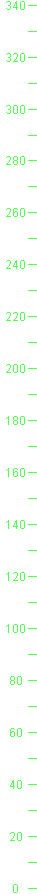
<style>
.page{position:relative;width:37px;height:894px;background:#ffffff}
.page>*{position:absolute;margin:0}
.t1{font:12px "ArialMT";color:#55ff55}
</style>
<div class="page">
<p class="t1" style="left:6px;top:1px;width:19px;height:9px">340</p>
<p class="t1" style="left:6px;top:53px;width:19px;height:9px">320</p>
<p class="t1" style="left:6px;top:105px;width:19px;height:9px">300</p>
<p class="t1" style="left:6px;top:156px;width:19px;height:9px">280</p>
<p class="t1" style="left:6px;top:208px;width:19px;height:9px">260</p>
<p class="t1" style="left:6px;top:260px;width:19px;height:9px">240</p>
<p class="t1" style="left:6px;top:312px;width:19px;height:9px">220</p>
<p class="t1" style="left:6px;top:364px;width:19px;height:9px">200</p>
<p class="t1" style="left:6px;top:416px;width:19px;height:9px">180</p>
<p class="t1" style="left:6px;top:468px;width:19px;height:9px">160</p>
<p class="t1" style="left:6px;top:520px;width:19px;height:9px">140</p>
<p class="t1" style="left:6px;top:572px;width:19px;height:9px">120</p>
<p class="t1" style="left:6px;top:624px;width:19px;height:9px">100</p>
<p class="t1" style="left:10px;top:676px;width:12px;height:9px">80</p>
<p class="t1" style="left:10px;top:728px;width:12px;height:9px">60</p>
<p class="t1" style="left:10px;top:780px;width:12px;height:9px">40</p>
<p class="t1" style="left:10px;top:832px;width:12px;height:9px">20</p>
<p class="t1" style="left:13px;top:884px;width:5px;height:9px">0</p>
</div>
